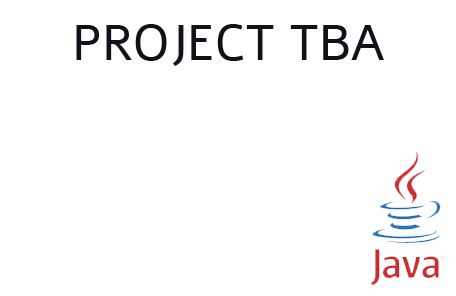
<style>
.page{position:relative;width:456px;height:296px;background:#ffffff}
.page>*{position:absolute;margin:0}
.t1{font:50px "Alef-Regular";color:#11111a}
</style>
<div class="page">
<p class="t1" style="left:76px;top:24px;width:308px;height:42px">PROJECT TBA</p>
</div>
